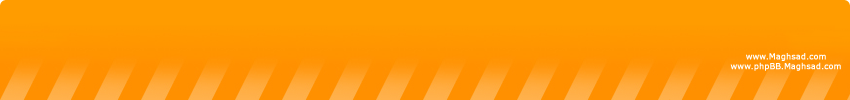
<style>
.page{position:relative;width:850px;height:100px;background:#ff9c00}
.page>*{position:absolute;margin:0}
.t1{font:8px "Verdana";color:#ffffff;font-weight:bold}
</style>
<div class="page">
<p class="t1" style="left:730px;top:53px;width:111px;height:18px;text-align:center">www.Maghsad.com<br>www.phpBB.Maghsad.com</p>
</div>
